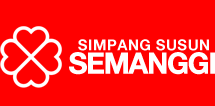
<style>
.page{position:relative;width:215px;height:106px;background:#ff0000}
.page>*{position:absolute;margin:0}
.t1{font:15px "HelveticaNeueLTCom-Bd";letter-spacing:0.04em;color:#ffffff}
.t2{font:29px "HelveticaNeueLTCom-Bd";letter-spacing:-0.06em;color:#ffffff;font-weight:bold}
</style>
<div class="page">
<p class="t1" style="left:78px;top:39px;width:131px;height:12px">SIMPANG SUSUN</p>
<p class="t2" style="left:69px;top:52px;width:147px;height:23px">SEMANGGI</p>
</div>
